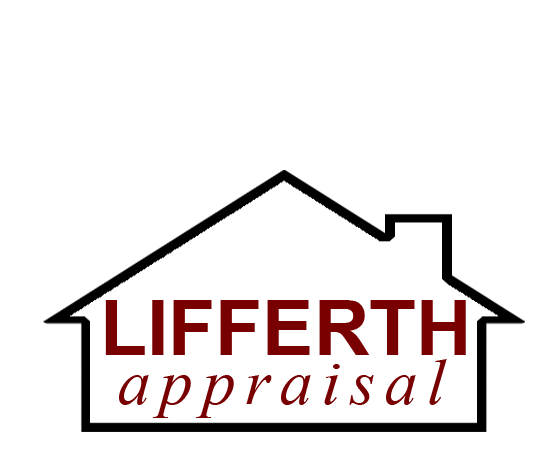
<style>
.page{position:relative;width:550px;height:450px;background:#ffffff}
.page>*{position:absolute;margin:0}
.t1{font:77px "Arial-BoldMT";color:#790000}
.t2{font:65px "TimesNewRomanPS-ItalicMT";letter-spacing:0.15em;color:#790000}
</style>
<div class="page">
<p class="t1" style="left:105px;top:300px;width:361px;height:55px">LIFFERTH</p>
<p class="t2" style="left:119px;top:359px;width:328px;height:59px">appraisal</p>
</div>
